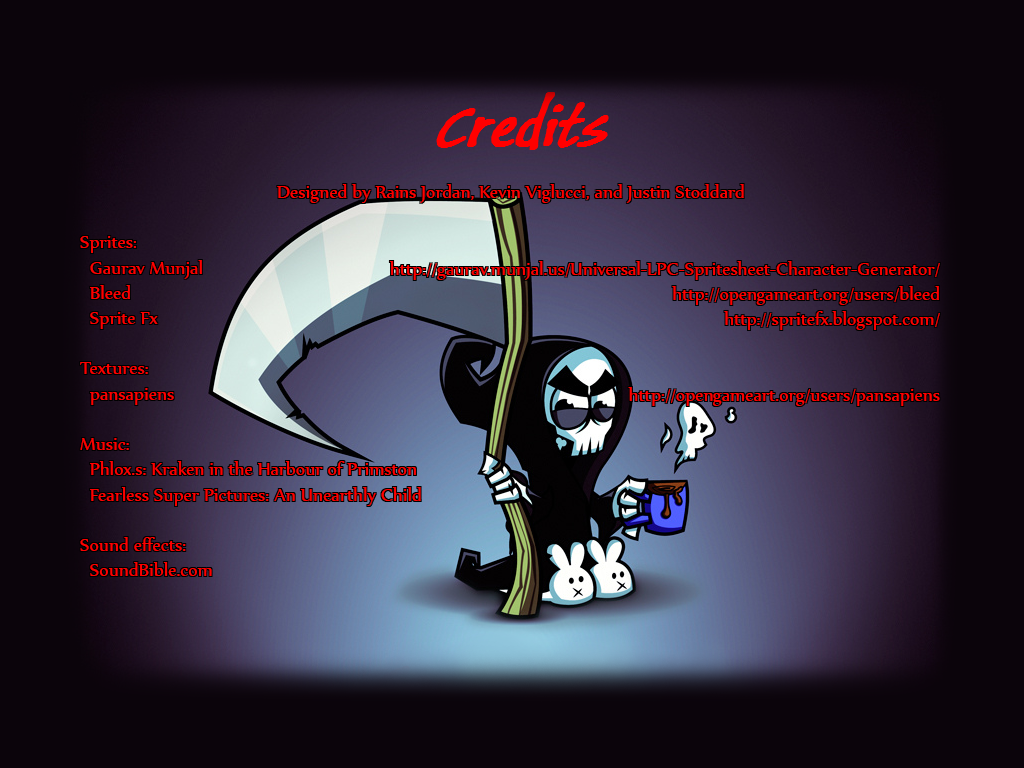
<style>
.page{position:relative;width:1024px;height:768px;background:#0b040b}
.page>*{position:absolute;margin:0}
.t1{font:21px "Nyala-Regular";color:#ff0000}
</style>
<div class="page">
<p class="t1" style="left:80px;top:184px;width:664px;height:392px">Designed by Rains Jordan, Kevin Viglucci, and Justin Stoddard<br><br>Sprites:<br>  Gaurav Munjal<br>  Bleed<br>  Sprite Fx<br><br>Textures:<br>  pansapiens<br><br>Music:<br>  Phlox.s: Kraken in the Harbour of Primston<br>  Fearless Super Pictures: An Unearthly Child<br><br>Sound effects:<br>  SoundBible.com</p>
<p class="t1" style="left:389px;top:261px;width:551px;height:145px;text-align:right">http://gaurav.munjal.us/Universal-LPC-Spritesheet-Character-Generator/<br>http://opengameart.org/users/bleed<br>http://spritefx.blogspot.com/<br><br><br>http://opengameart.org/users/pansapiens</p>
</div>
